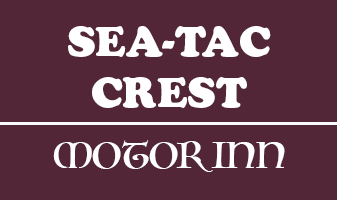
<style>
.page{position:relative;width:337px;height:200px;background:#522637}
.page>*{position:absolute;margin:0}
.t1{font:42px "CooperBlackStd";color:#ffffff}
.t2{font:36px "Luminari-Regular";color:#ffffff}
</style>
<div class="page">
<p class="t1" style="left:68px;top:26px;width:203px;height:82px;text-align:center">SEA-TAC<br>CREST</p>
<p class="t2" style="left:53px;top:140px;width:232px;height:32px">MOTOR INN</p>
</div>
